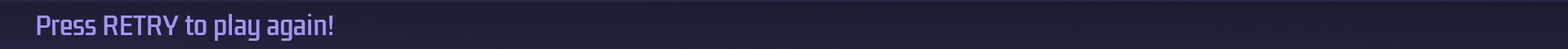
<style>
.page{position:relative;width:1568px;height:49px}
.page>*{position:absolute;margin:0}
.t1{font:24.5px "KdamThmorPro-Regular";color:#9d97f3}
</style>
<div class="page">
<p class="t1" style="left:37px;top:14px;width:296px;height:27px">Press RETRY to play again!</p>
</div>
